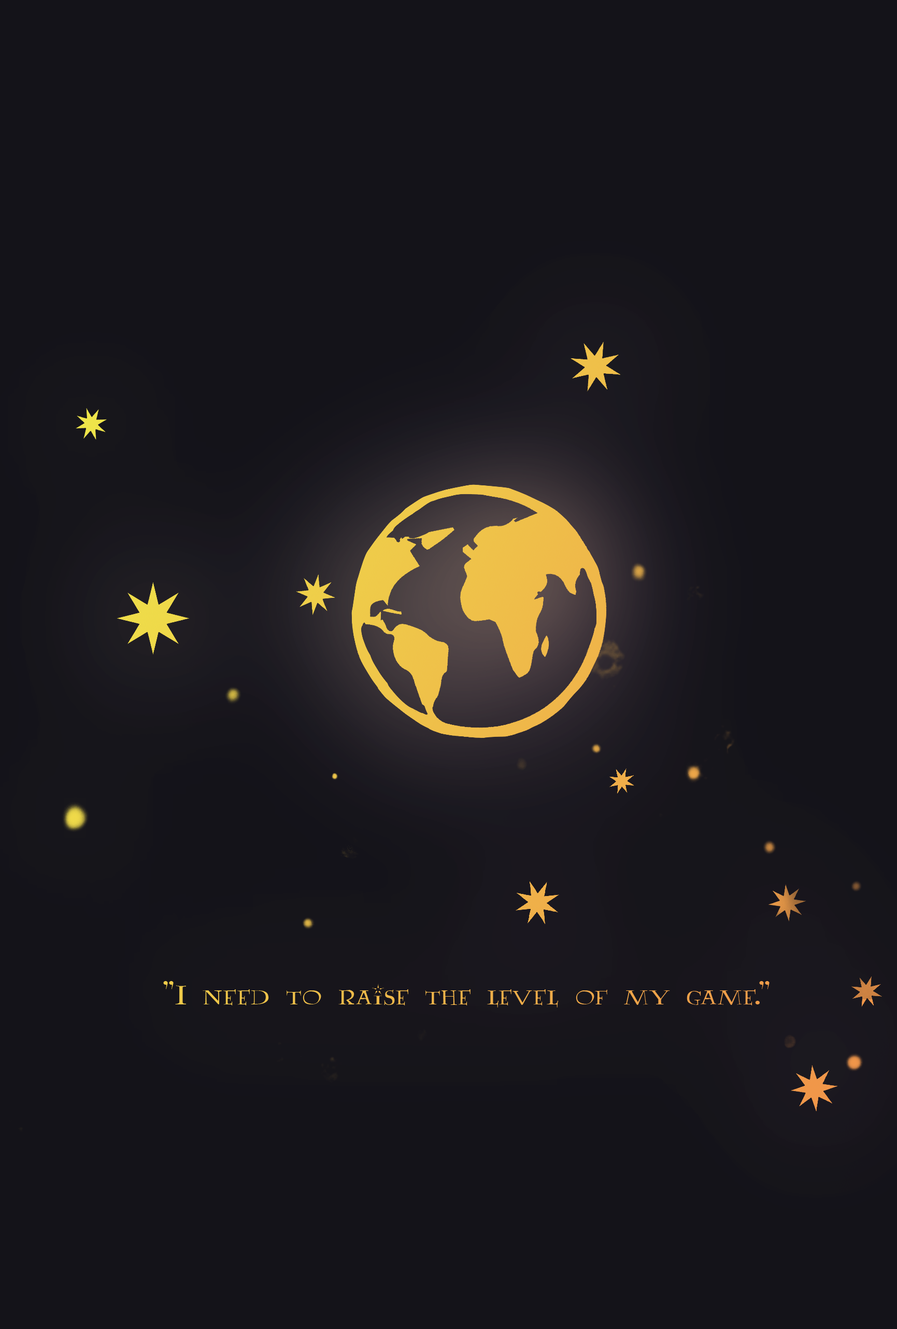
<style>
.page{position:relative;width:897px;height:1329px;background:#141319}
.page>*{position:absolute;margin:0}
.t1{font:31.1px "AA-Lumos-Caps";color:#efb349}
</style>
<div class="page">
<p class="t1" style="left:163px;top:981px;width:607px;height:26px">"I need to raise the level of my game."</p>
</div>
